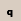
<style>
.page{position:relative;width:21px;height:21px;background:#d9cdc1}
.page>*{position:absolute;margin:0}
.t1{font:9px "Tahoma-Bold";color:#000000}
</style>
<div class="page">
<p class="t1" style="left:7px;top:10px;width:6px;height:7px">q</p>
</div>
